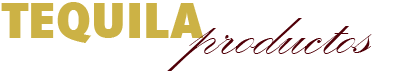
<style>
.page{position:relative;width:400px;height:76px;background:#ffffff}
.page>*{position:absolute;margin:0}
.t1{font:51.3px "Humanist521BT-XtraBoldCondensed";color:#ccb245;scale:1.05 1}
.t2{font:78.3px "KunstlerScript";color:#500008;scale:1.05 1}
</style>
<div class="page">
<p class="t1" style="left:1px;top:2px;width:203px;height:41px">TEQUILA</p>
<p class="t2" style="left:167px;top:18px;width:205px;height:53px">productos</p>
</div>
